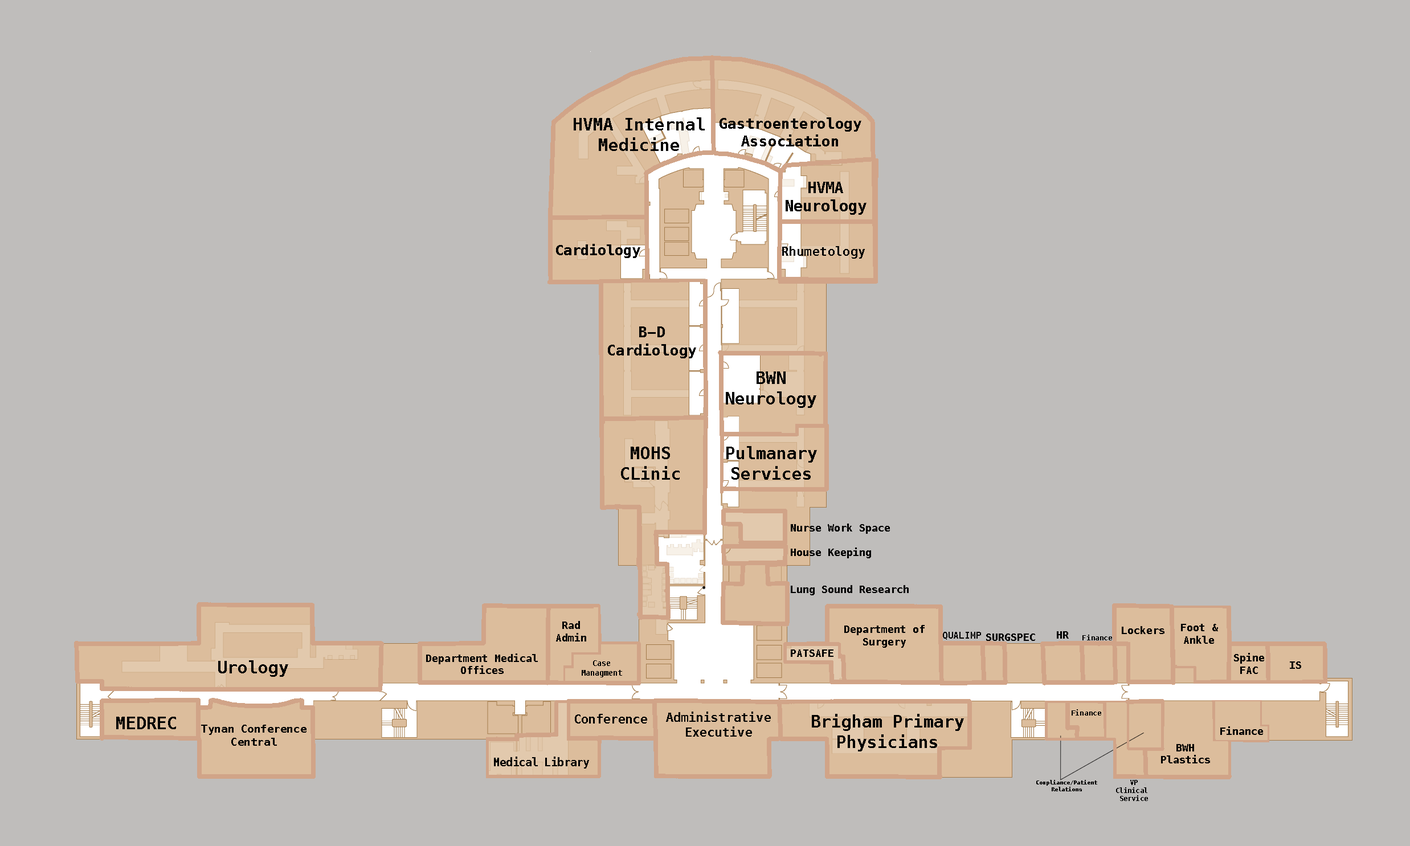
<style>
.page{position:relative;width:1410px;height:846px;background:#bfbdbb}
.page>*{position:absolute;margin:0}
.t1{font:17.1px "Menlo-Bold";color:#000000}
.t2{font:14.9px "Menlo-Bold";color:#000000}
.t3{font:15.2px "Menlo-Bold";color:#000000}
.t4{font:14.2px "Menlo-Bold";color:#000000}
.t5{font:12.8px "Menlo-Bold";color:#000000}
.t6{font:15px "Menlo-Bold";color:#000000}
.t7{font:10.3px "Menlo-Bold";color:#000000}
.t8{font:9.1px "Menlo-Bold";color:#000000}
.t9{font:7.1px "Menlo-Bold";color:#000000}
.t10{font:8px "Menlo-Bold";color:#000000}
.t11{font:12.3px "Menlo-Bold";color:#000000}
.t12{font:12.5px "Menlo-Bold";color:#000000}
.t13{font:7.2px "Menlo-Bold";color:#000000}
.t14{font:11px "Menlo-Bold";color:#000000}
.t15{font:12px "Menlo-Bold";color:#000000;scale:0.89 1}
.t16{font:6.6px "Menlo-Bold";color:#000000}
</style>
<div class="page">
<p class="t1" style="left:574px;top:117px;width:131px;height:34px;text-align:center">HVMA Internal<br>Medicine</p>
<p class="t2" style="left:719px;top:117px;width:142px;height:29px;text-align:center">Gastroenterology<br>Association</p>
<p class="t3" style="left:785px;top:182px;width:81px;height:33px;text-align:center">HVMA<br>Neurology</p>
<p class="t4" style="left:556px;top:244px;width:84px;height:14px">Cardiology</p>
<p class="t5" style="left:782px;top:246px;width:83px;height:13px">Rhumetology</p>
<p class="t6" style="left:608px;top:326px;width:88px;height:32px;text-align:center">B-D<br>Cardiology</p>
<p class="t1" style="left:726px;top:371px;width:90px;height:37px;text-align:center">BWN<br>Neurology</p>
<p class="t1" style="left:621px;top:447px;width:59px;height:33px;text-align:center">MOHS<br>CLinic</p>
<p class="t1" style="left:726px;top:446px;width:91px;height:34px;text-align:center">Pulmanary<br>Services</p>
<p class="t7" style="left:791px;top:523px;width:118px;height:72px">Nurse Work Space<br><br>House Keeping<br><br><br>Lung Sound Research</p>
<p class="t7" style="left:556px;top:621px;width:30px;height:20px;text-align:center">Rad<br>Admin</p>
<p class="t7" style="left:844px;top:625px;width:80px;height:23px;text-align:center">Department of<br>Surgery</p>
<p class="t7" style="left:1122px;top:626px;width:42px;height:8px">Lockers</p>
<p class="t7" style="left:1181px;top:624px;width:37px;height:20px;text-align:center">Foot &amp;<br>Ankle</p>
<p class="t8" style="left:943px;top:632px;width:38px;height:8px">QUALIMP</p>
<p class="t7" style="left:986px;top:633px;width:49px;height:8px">SURGSPEC</p>
<p class="t7" style="left:1057px;top:631px;width:12px;height:8px">HR</p>
<p class="t9" style="left:1082px;top:635px;width:30px;height:5px">Finance</p>
<p class="t7" style="left:426px;top:653px;width:112px;height:21px;text-align:center">Department Medical<br>Offices</p>
<p class="t7" style="left:791px;top:649px;width:42px;height:8px">PATSAFE</p>
<p class="t7" style="left:1234px;top:653px;width:30px;height:21px;text-align:center">Spine<br>FAC</p>
<p class="t1" style="left:218px;top:660px;width:70px;height:17px">Urology</p>
<p class="t10" style="left:582px;top:660px;width:40px;height:17px;text-align:center">Case<br>Managment</p>
<p class="t7" style="left:1290px;top:661px;width:11px;height:8px">IS</p>
<p class="t11" style="left:575px;top:714px;width:72px;height:9px">Conference</p>
<p class="t12" style="left:666px;top:711px;width:105px;height:25px;text-align:center">Administrative<br>Executive</p>
<p class="t1" style="left:812px;top:714px;width:152px;height:37px;text-align:center">Brigham Primary<br>Physicians</p>
<p class="t13" style="left:1071px;top:709px;width:30px;height:6px">Finance</p>
<p class="t1" style="left:116px;top:717px;width:60px;height:12px">MEDREC</p>
<p class="t14" style="left:201px;top:725px;width:105px;height:21px;text-align:center">Tynan Conference<br>Central</p>
<p class="t7" style="left:1220px;top:726px;width:43px;height:9px">Finance</p>
<p class="t7" style="left:1161px;top:744px;width:49px;height:19px;text-align:center">BWH<br>Plastics</p>
<p class="t15" style="left:494px;top:756px;width:95px;height:12px">Medical Library</p>
<p class="t16" style="left:1116px;top:780px;width:32px;height:21px;text-align:center">VP<br>Clinical <br>Service</p>
</div>
